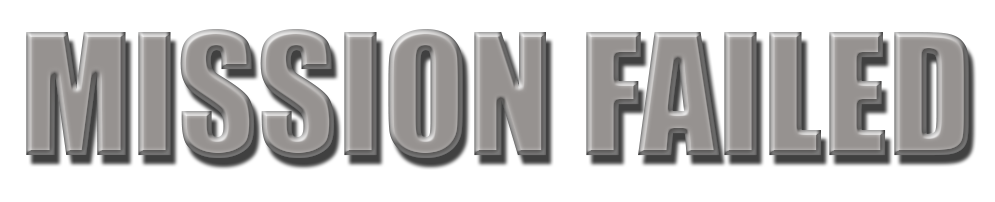
<style>
.page{position:relative;width:995px;height:202px;background:#ffffff}
.page>*{position:absolute;margin:0}
.t1{font:156px "Impact";color:#969290;text-transform:uppercase}
</style>
<div class="page">
<p class="t1" style="left:26px;top:29px;width:943px;height:129px">MISSION FAILED</p>
</div>
